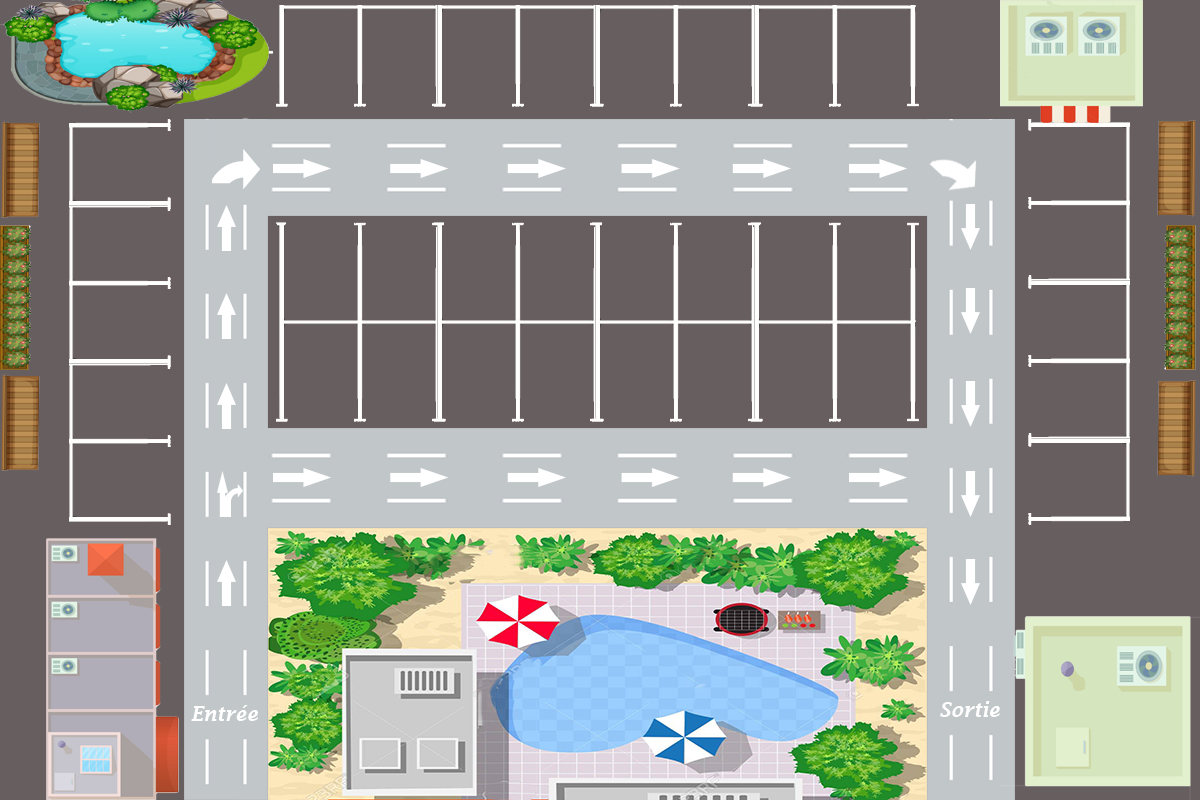
<style>
.page{position:relative;width:1200px;height:800px;background:#675e5f}
.page>*{position:absolute;margin:0}
.t1{font:20px "LucidaFax-DemiItalic";color:#ffffff}
</style>
<div class="page">
<p class="t1" style="left:940px;top:701px;width:60px;height:16px">Sortie</p>
<p class="t1" style="left:191px;top:705px;width:67px;height:16px">Entrée</p>
</div>
